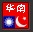
<style>
.page{position:relative;width:33px;height:32px;background:#333333}
.page>*{position:absolute;margin:0}
.t1{font:10.4px "SimSun";color:#ffffff}
</style>
<div class="page">
<p class="t1" style="left:6px;top:4px;width:19px;height:9px">华南</p>
</div>
